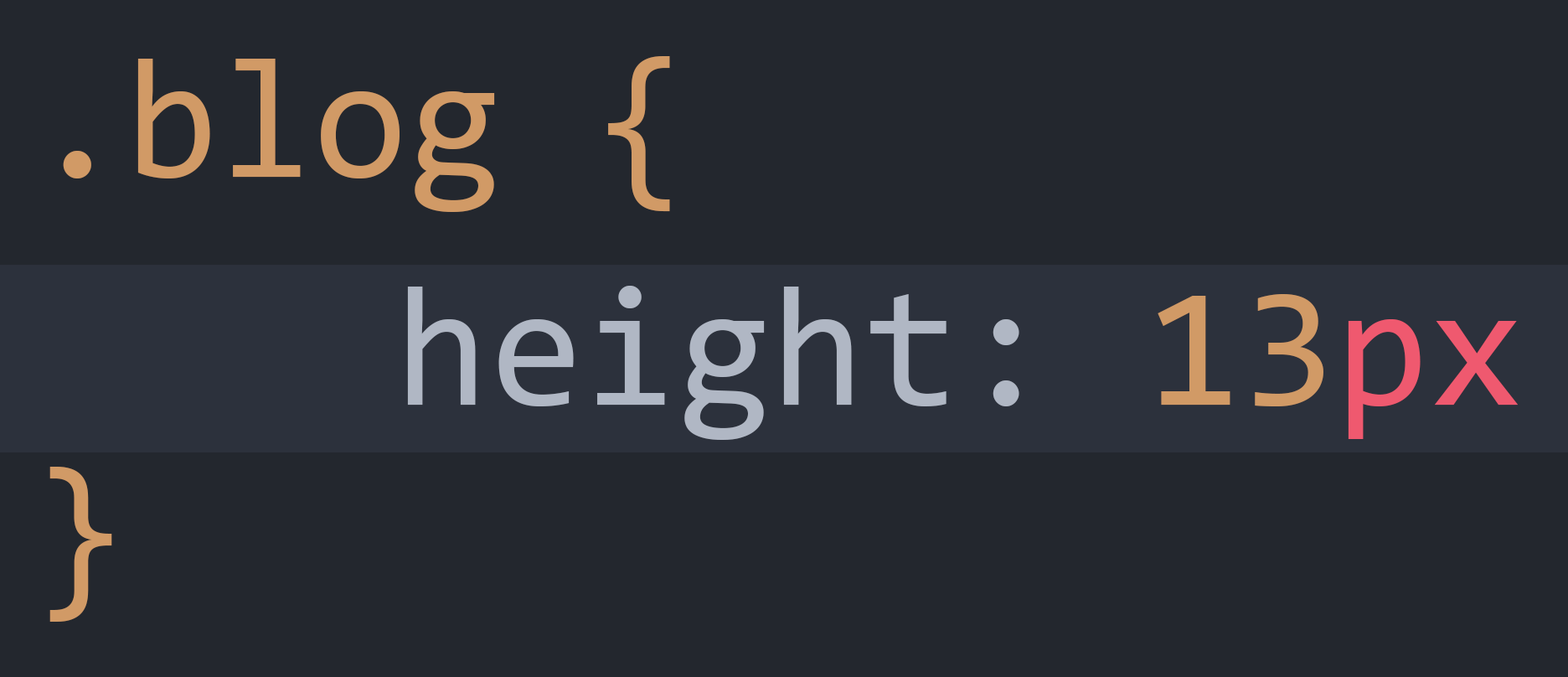
<style>
.page{position:relative;width:1568px;height:677px;background:#23272e}
.page>*{position:absolute;margin:0}
.t1{font:171px "Consolas";color:#d19a66}
.t2{font:171px "Consolas";color:#b0b7c4}
.t3{font:171px "Consolas";color:#ef596f}
</style>
<div class="page">
<p class="t1" style="left:49px;top:56px;width:621px;height:566px">.blog {<br><br>}</p>
<p class="t2" style="left:407px;top:286px;width:1112px;height:154px">height: <span class="t1">13</span><span class="t3">px</span></p>
</div>
